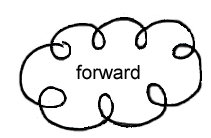
<style>
.page{position:relative;width:211px;height:138px;background:#ffffff}
.page>*{position:absolute;margin:0}
.t1{font:19.4px "ArialMT";color:#000000}
</style>
<div class="page">
<p class="t1" style="left:76px;top:64px;width:64px;height:16px">forward</p>
</div>
